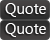
<style>
.page{position:relative;width:50px;height:40px}
.page>*{position:absolute;margin:0}
.t1{font:15px "SegoeUI";color:#ffffff}
</style>
<div class="page">
<p class="t1" style="left:5px;top:3px;width:41px;height:14px">Quote</p>
<p class="t1" style="left:5px;top:23px;width:41px;height:14px">Quote</p>
</div>
